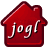
<style>
.page{position:relative;width:48px;height:48px;background:#ffffff}
.page>*{position:absolute;margin:0}
.t1{font:15px "CataneoBT-Light";letter-spacing:0.1em;color:#ffffff;font-weight:bold}
</style>
<div class="page">
<p class="t1" style="left:7px;top:20px;width:33px;height:18px">jogl</p>
</div>
